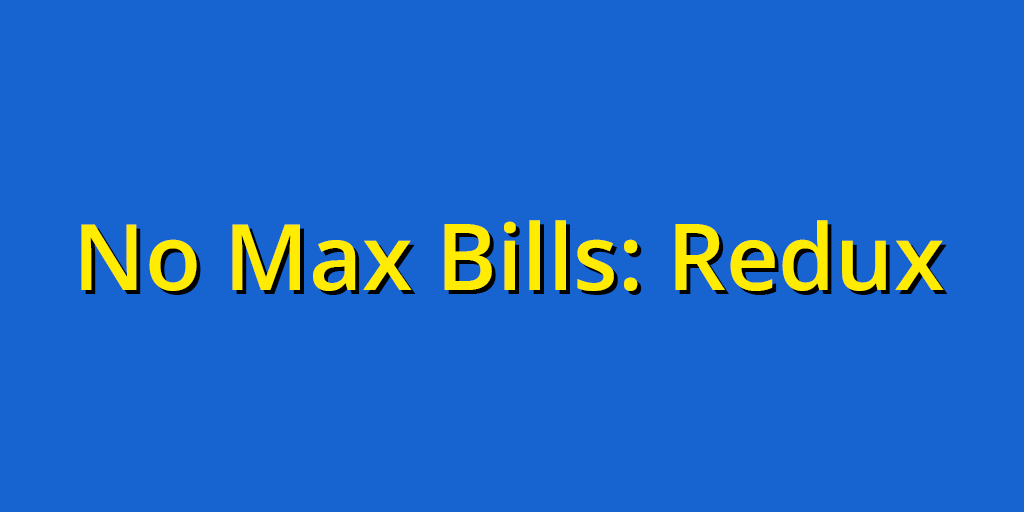
<style>
.page{position:relative;width:1024px;height:512px;background:#1764d0}
.page>*{position:absolute;margin:0}
.t1{font:91.7px "OpenSans-SemiBold";color:#ffec02}
.t2{font:91.7px "OpenSans-SemiBold"}
</style>
<div class="page">
<p class="t1" style="left:81px;top:220px;width:863px;height:71px">No Max Bills: Redux</p>
<p class="t2" style="left:85px;top:224px;width:863px;height:71px">No Max Bills: Redux</p>
</div>
